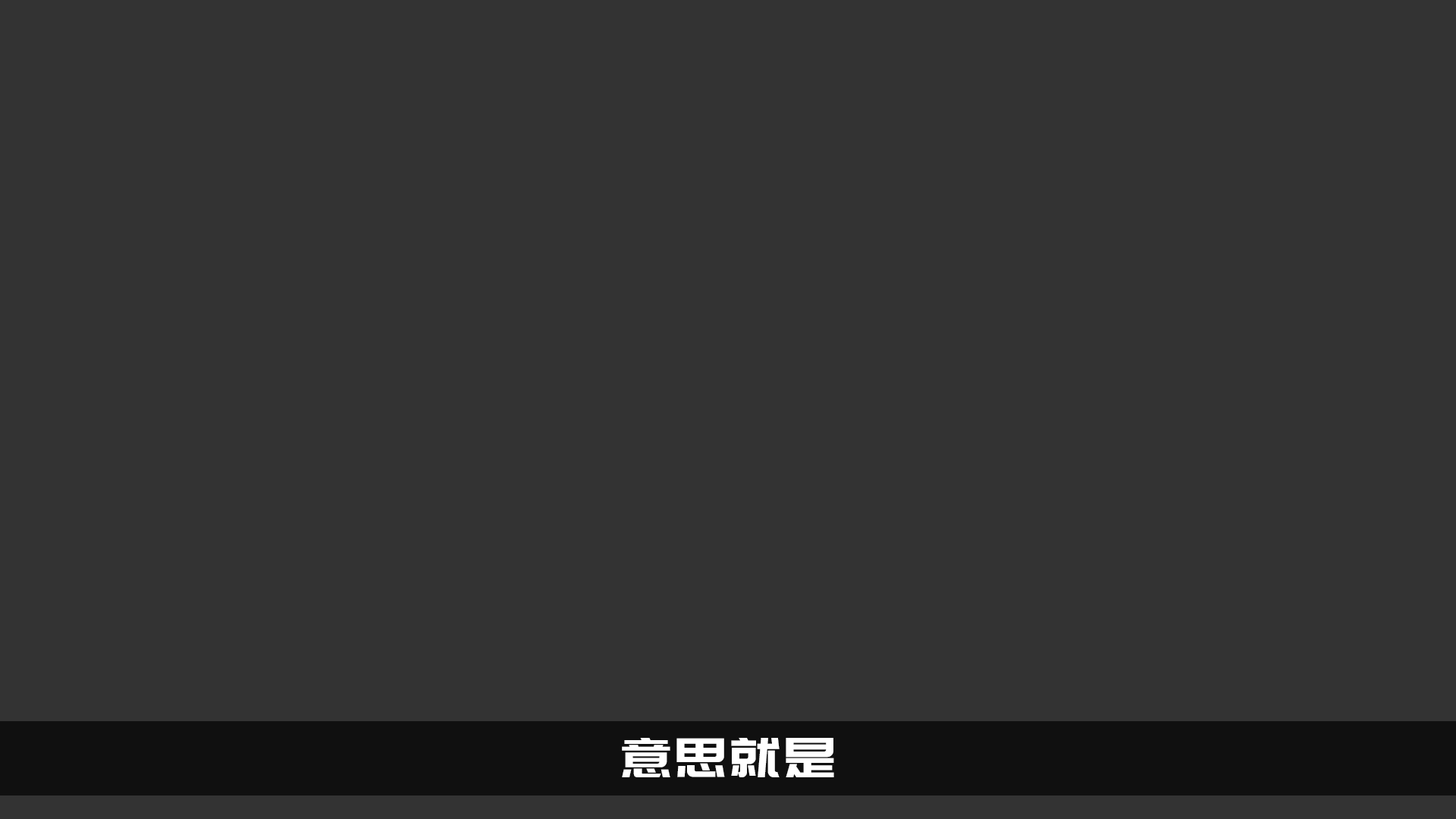
<style>
.page{position:relative;width:1456px;height:819px;background:#333333}
.page>*{position:absolute;margin:0}
.t1{font:54.6px "PangMenZhengDao-3";color:#ffffff}
</style>
<div class="page">
<p class="t1" style="left:622px;top:738px;width:212px;height:39px">意思就是</p>
</div>
